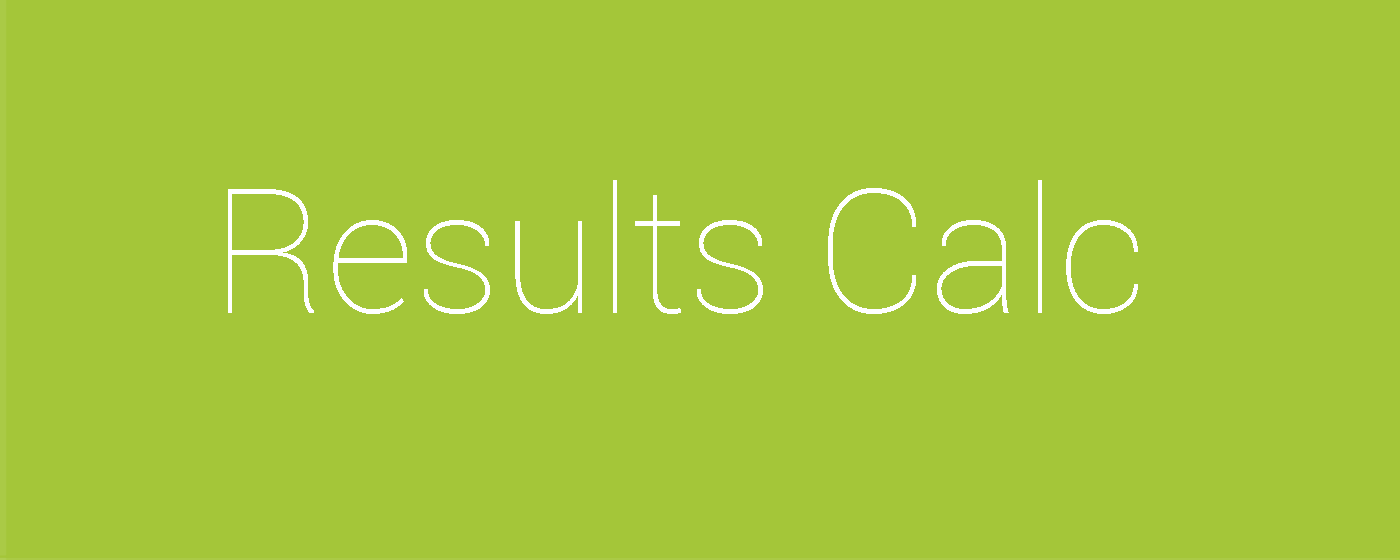
<style>
.page{position:relative;width:1400px;height:560px;background:#a4c639}
.page>*{position:absolute;margin:0}
.t1{font:175px "Roboto-Thin";color:#ffffff}
</style>
<div class="page">
<p class="t1" style="left:228px;top:180px;width:910px;height:134px">Results Calc</p>
</div>
